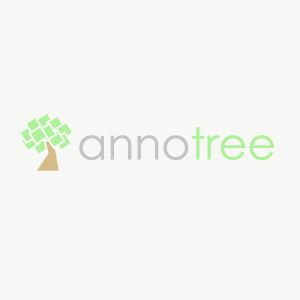
<style>
.page{position:relative;width:300px;height:300px;background:#f7f8f5}
.page>*{position:absolute;margin:0}
.t1{font:44.1px "CenturyGothic";color:#c7c3c3}
.t2{font:44.1px "CenturyGothic";color:#aff19a}
</style>
<div class="page">
<p class="t1" style="left:79px;top:127px;width:195px;height:33px">anno<span class="t2">tree</span></p>
</div>
